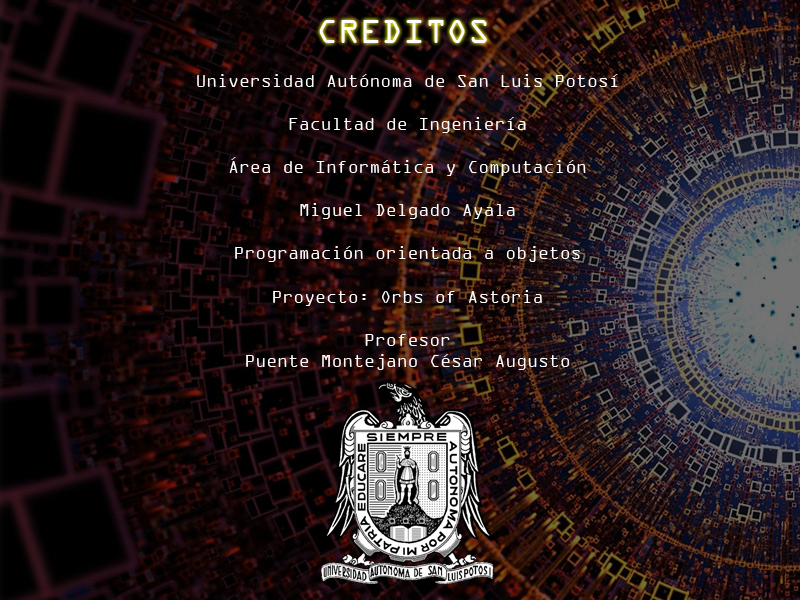
<style>
.page{position:relative;width:800px;height:600px}
.page>*{position:absolute;margin:0}
.t1{font:36px "OCRAExtended";color:#fcfcfc}
.t2{font:18px "OCRAExtended";color:#fcfcfc}
</style>
<div class="page">
<p class="t1" style="left:319px;top:20px;width:168px;height:23px">CREDITOS</p>
<p class="t2" style="left:197px;top:74px;width:421px;height:296px;text-align:center">Universidad Autónoma de San Luis Potosí<br><br>Facultad de Ingeniería<br><br>Área de Informática y Computación<br><br>Miguel Delgado Ayala<br><br>Programación orientada a objetos <br><br>Proyecto: Orbs of Astoria<br><br>Profesor<br>Puente Montejano César Augusto</p>
</div>
